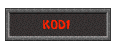
<style>
.page{position:relative;width:117px;height:50px;background:#ffffff}
.page>*{position:absolute;margin:0}
.t1{font:14px "MortalKombat2";color:#ff2100}
</style>
<div class="page">
<p class="t1" style="left:43px;top:20px;width:27px;height:9px">kodi</p>
</div>
